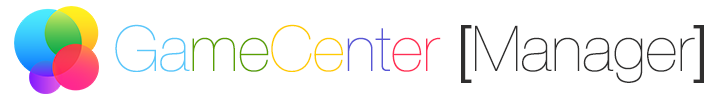
<style>
.page{position:relative;width:725px;height:100px;background:#ffffff}
.page>*{position:absolute;margin:0}
.t1{font:63px "HelveticaNeue-UltraLight";color:#2f2e2e}
.t2{font:63px "HelveticaNeue-UltraLight";color:#5ac8fa}
.t3{font:63px "HelveticaNeue-UltraLight";color:#5aa000}
.t4{font:63px "HelveticaNeue-UltraLight";color:#ffcc00}
.t5{font:63px "HelveticaNeue-UltraLight";color:#5856d6}
.t6{font:63px "HelveticaNeue-UltraLight";color:#ff2d55}
.t7{font:63px "HelveticaNeue-Light";color:#2f2e2e}
</style>
<div class="page">
<p class="t1" style="left:115px;top:24px;width:589px;height:59px"><span class="t2">Ga</span><span class="t3">me</span><span class="t4">Ce</span><span class="t5">nt</span><span class="t6">er </span><span class="t7">[</span>Manager<span class="t7">]</span></p>
</div>
